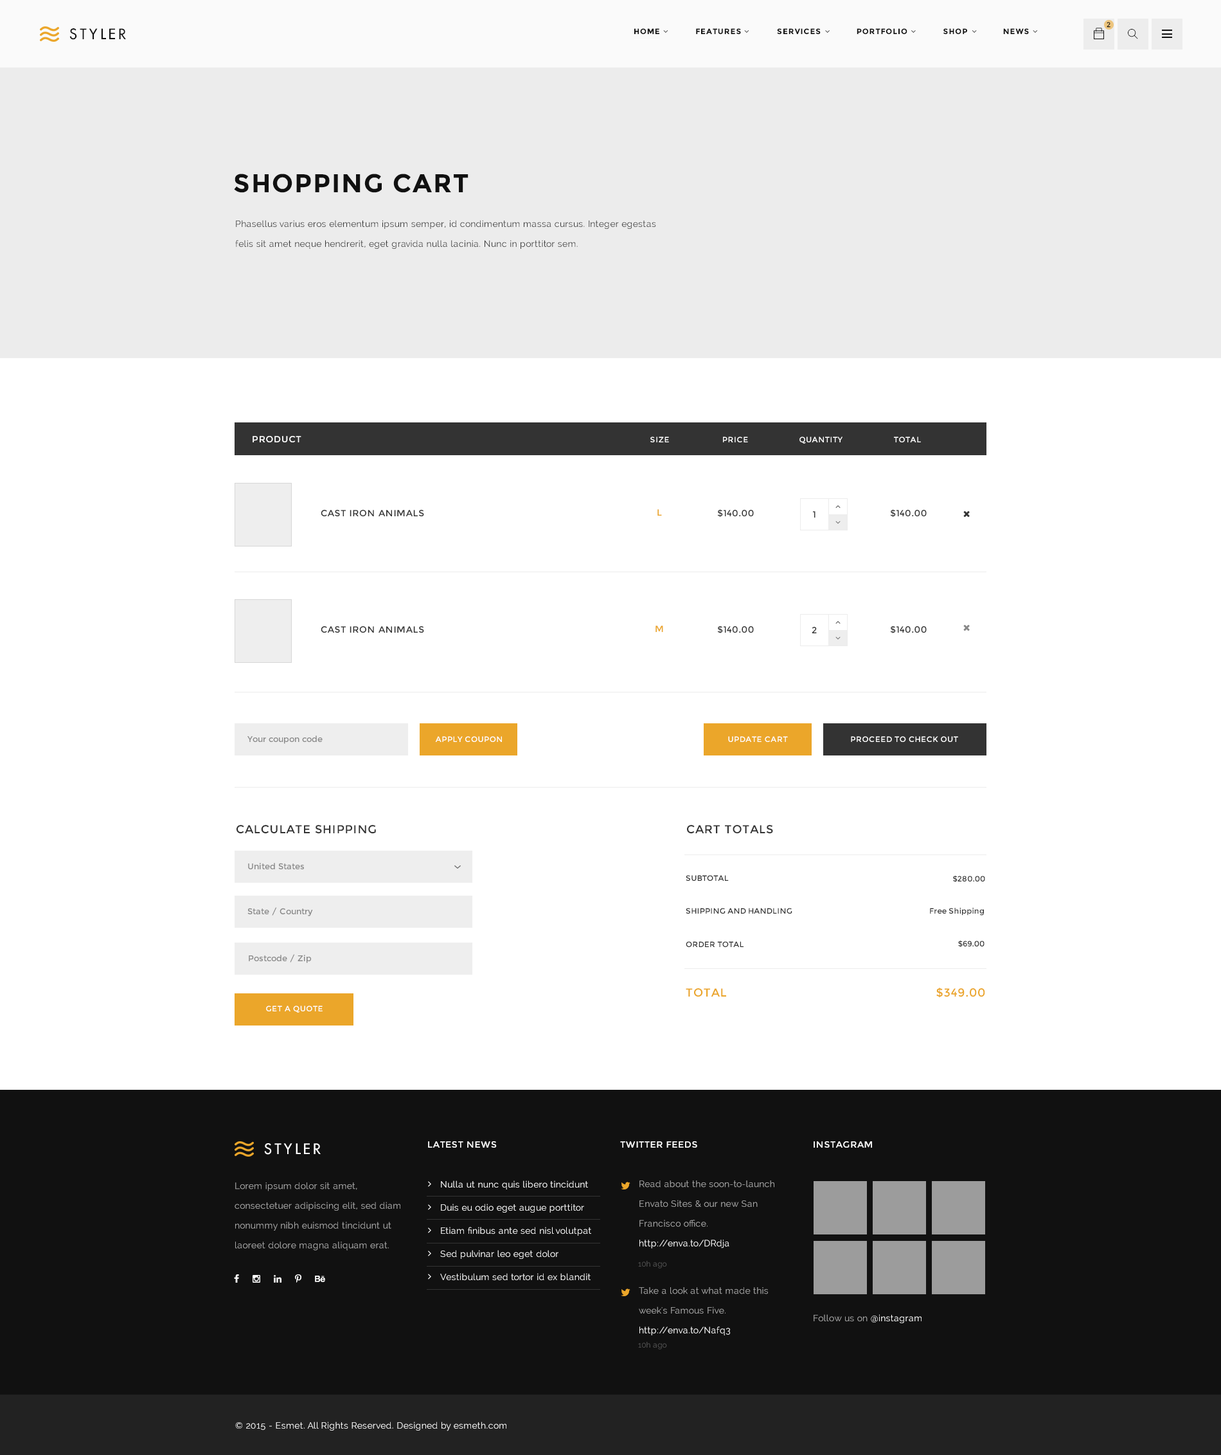
<style>
.page{position:relative;width:1221px;height:1455px;background:#ffffff}
.page>*{position:absolute;margin:0}
.t1{font:14.1px "FuturaLT";letter-spacing:0.2em;color:#111111;text-transform:uppercase}
.t2{font:7.7px "Montserrat-Bold";letter-spacing:0.075em;color:#111111;text-transform:uppercase}
.t3{font:7.1px "Montserrat-Regular";letter-spacing:0.075em;color:#111111;text-transform:uppercase}
.t4{font:25.7px "Montserrat-Bold";letter-spacing:0.05em;color:#111111;text-transform:uppercase}
.t5{font:9px/19.8px "Raleway";letter-spacing:0.02em;color:#333333}
.t6{font:9px "Montserrat-Regular";letter-spacing:0.05em;color:#ffffff}
.t7{font:7.7px "Montserrat-Regular";letter-spacing:0.05em;color:#ffffff}
.t8{font:9px "Montserrat-Regular";letter-spacing:0.05em;color:#333333;text-transform:uppercase}
.t9{font:9px "Montserrat-Regular";letter-spacing:0.02em;color:#eba62a}
.t10{font:9px "Montserrat-Regular";letter-spacing:0.02em;color:#333333}
.t11{font:9px "Montserrat-Regular";letter-spacing:0.1em;color:#333333}
.t12{font:9px "Montserrat-Regular";color:#333333}
.t13{font:8.4px "Montserrat-Regular";color:#888888}
.t14{font:7.7px "Montserrat-Regular";letter-spacing:0.05em;color:#ffffff;text-transform:uppercase}
.t15{font:11.6px "Montserrat-Regular";letter-spacing:0.05em;color:#333333}
.t16{font:7.7px "Montserrat-Regular";letter-spacing:0.02em;color:#333333}
.t17{font:11.6px "Montserrat-Regular";letter-spacing:0.05em;color:#eba62a}
.t18{font:14.1px "FuturaLT";letter-spacing:0.2em;color:#ffffff;text-transform:uppercase}
.t19{font:9px "Montserrat-Regular";letter-spacing:0.05em;color:#ffffff;text-transform:uppercase}
.t20{font:9px/23.1px "Raleway";letter-spacing:0.02em;color:#ffffff}
.t21{font:9px/19.8px "Raleway";letter-spacing:0.02em;color:#a9a9a9}
.t22{font:9px/19.8px "Raleway";letter-spacing:0.02em;color:#ffffff}
.t23{font:7.7px "Raleway";letter-spacing:0.02em;color:#545454}
.t24{font:9px "Raleway";letter-spacing:0.02em;color:#a9a9a9}
.t25{font:9px "Raleway";letter-spacing:0.02em;color:#ffffff}
</style>
<div class="page">
<p class="t1" style="left:69px;top:28px;width:57px;height:12px">styler</p>
<p class="t2" style="left:634px;top:28px;width:395px;height:6px">HOME              FEATURES              SERVICES              portfolio              SHOP              NEWS</p>
<p class="t3" style="left:1107px;top:22px;width:4px;height:6px">2</p>
<p class="t4" style="left:234px;top:174px;width:235px;height:19px">shopping cart</p>
<p class="t5" style="left:235px;top:220px;width:421px;height:29px">Phasellus varius eros elementum ipsum semper, id condimentum massa cursus. Integer egestas felis sit amet neque hendrerit, eget gravida nulla lacinia. Nunc in porttitor sem.</p>
<p class="t6" style="left:253px;top:436px;width:49px;height:6px">PRODUCT</p>
<p class="t7" style="left:651px;top:437px;width:18px;height:5px">SIZE</p>
<p class="t7" style="left:723px;top:437px;width:25px;height:5px">PRICE</p>
<p class="t7" style="left:800px;top:437px;width:43px;height:7px">QUANTITY</p>
<p class="t7" style="left:894px;top:437px;width:27px;height:5px">TOTAL</p>
<p class="t8" style="left:321px;top:510px;width:103px;height:6px">Cast Iron Animals</p>
<p class="t9" style="left:658px;top:509px;width:4px;height:7px">L</p>
<p class="t10" style="left:717px;top:509px;width:37px;height:8px">$140.00</p>
<p class="t10" style="left:890px;top:509px;width:37px;height:8px">$140.00</p>
<p class="t11" style="left:813px;top:511px;width:3px;height:7px">1</p>
<p class="t8" style="left:321px;top:626px;width:103px;height:7px">Cast Iron Animals</p>
<p class="t9" style="left:656px;top:626px;width:7px;height:6px">M</p>
<p class="t10" style="left:717px;top:626px;width:37px;height:7px">$140.00</p>
<p class="t12" style="left:812px;top:627px;width:5px;height:6px">2</p>
<p class="t10" style="left:890px;top:626px;width:37px;height:7px">$140.00</p>
<p class="t13" style="left:248px;top:735px;width:75px;height:9px">Your coupon code</p>
<p class="t14" style="left:435px;top:736px;width:67px;height:6px">APPLY coupon</p>
<p class="t7" style="left:728px;top:736px;width:60px;height:6px">UPDATE CART</p>
<p class="t7" style="left:851px;top:736px;width:108px;height:6px">PROCEED TO CHECK OUT</p>
<p class="t15" style="left:237px;top:825px;width:139px;height:9px">CALCULATE SHIPPING</p>
<p class="t15" style="left:687px;top:825px;width:86px;height:9px">CART TOTALS</p>
<p class="t13" style="left:248px;top:863px;width:56px;height:6px">United States</p>
<p class="t16" style="left:686px;top:875px;width:43px;height:6px">SUBTOTAL</p>
<p class="t16" style="left:953px;top:876px;width:33px;height:6px">$280.00</p>
<p class="t13" style="left:248px;top:907px;width:65px;height:9px">State / Country</p>
<p class="t16" style="left:686px;top:908px;width:107px;height:6px">SHIPPING AND HANDLING</p>
<p class="t16" style="left:930px;top:908px;width:54px;height:7px">Free Shipping</p>
<p class="t16" style="left:686px;top:941px;width:58px;height:6px">ORDER TOTAL</p>
<p class="t16" style="left:959px;top:941px;width:26px;height:6px">$69.00</p>
<p class="t13" style="left:249px;top:954px;width:63px;height:9px">Postcode / Zip</p>
<p class="t17" style="left:686px;top:988px;width:40px;height:9px">TOTAL</p>
<p class="t17" style="left:937px;top:987px;width:49px;height:11px">$349.00</p>
<p class="t7" style="left:266px;top:1005px;width:57px;height:8px">GET A QUOTE</p>
<p class="t18" style="left:264px;top:1143px;width:57px;height:12px">styler</p>
<p class="t19" style="left:428px;top:1141px;width:69px;height:7px">latest news</p>
<p class="t19" style="left:620px;top:1141px;width:78px;height:7px">twitter feeds</p>
<p class="t19" style="left:814px;top:1141px;width:58px;height:7px">instagram</p>
<p class="t20" style="left:440px;top:1180px;width:151px;height:101px">Nulla ut nunc quis libero tincidunt<br>Duis eu odio eget augue porttitor<br>Etiam finibus ante sed nisl volutpat<br>Sed pulvinar leo eget dolor<br>Vestibulum sed tortor id ex blandit</p>
<p class="t21" style="left:640px;top:1180px;width:135px;height:68px">Read about the soon-to-launch Envato Sites &amp; our new San Francisco office. <span class="t22">http://enva.to/DRdja</span></p>
<p class="t21" style="left:235px;top:1182px;width:166px;height:68px">Lorem ipsum dolor sit amet, consectetuer adipiscing elit, sed diam nonummy nibh euismod tincidunt ut laoreet dolore magna aliquam erat.</p>
<p class="t23" style="left:638px;top:1261px;width:29px;height:7px">10h ago</p>
<p class="t21" style="left:639px;top:1287px;width:129px;height:48px">Take a look at what made this week's Famous Five. <span class="t22">http://enva.to/Nafq3</span></p>
<p class="t24" style="left:814px;top:1314px;width:108px;height:9px">Follow us on <span class="t25">@instagram</span></p>
<p class="t23" style="left:638px;top:1342px;width:29px;height:7px">10h ago</p>
<p class="t25" style="left:235px;top:1421px;width:272px;height:10px">© 2015 - Esmet. All Rights Reserved. Designed by esmeth.com</p>
</div>
